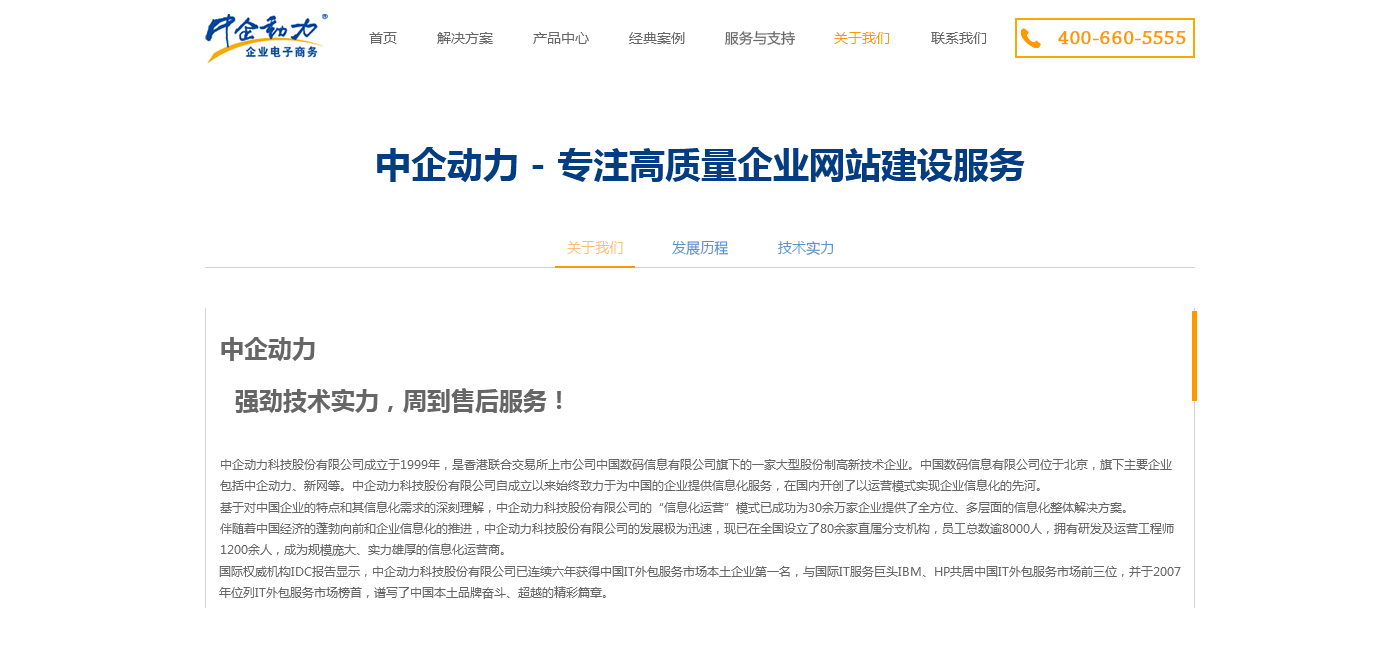
<style>
.page{position:relative;width:1400px;height:670px;background:#ffffff}
.page>*{position:absolute;margin:0}
.t1{font:14px "MicrosoftYaHei";color:#666666}
.t2{font:14px "MicrosoftYaHei";color:#ff9900}
.t3{font:20px "ChaparralPro-Regular";color:#ff9900;font-weight:bold}
.t4{font:36px "MicrosoftYaHei-Bold";color:#003d82}
.t5{font:14.6px "MicrosoftYaHei";color:#ffba73;scale:0.97 1}
.t6{font:14.6px "MicrosoftYaHei";color:#5a94cf;scale:0.97 1}
.t7{font:24px "MicrosoftYaHei-Bold";color:#666666}
.t8{font:12px "MicrosoftYaHei";color:#666666}
</style>
<div class="page">
<p class="t1" style="left:369px;top:32px;width:28px;height:12px">首页</p>
<p class="t1" style="left:437px;top:32px;width:56px;height:12px">解决方案</p>
<p class="t1" style="left:533px;top:32px;width:56px;height:12px">产品中心</p>
<p class="t1" style="left:629px;top:32px;width:56px;height:12px">经典案例</p>
<p class="t1" style="left:725px;top:31px;width:70px;height:14px">服务与支持</p>
<p class="t2" style="left:834px;top:32px;width:55px;height:12px">关于我们</p>
<p class="t1" style="left:931px;top:32px;width:55px;height:12px">联系我们</p>
<p class="t3" style="left:1058px;top:31px;width:128px;height:14px">400-660-5555</p>
<p class="t4" style="left:377px;top:147px;width:648px;height:36px">中企动力 - 专注高质量企业网站建设服务</p>
<p class="t5" style="left:567px;top:241px;width:56px;height:13px">关于我们</p>
<p class="t6" style="left:672px;top:241px;width:57px;height:15px">发展历程</p>
<p class="t6" style="left:778px;top:241px;width:56px;height:15px">技术实力</p>
<p class="t7" style="left:221px;top:337px;width:94px;height:25px">中企动力</p>
<p class="t7" style="left:235px;top:388px;width:327px;height:25px">强劲技术实力，周到售后服务！</p>
<p class="t8" style="left:220px;top:458px;width:952px;height:34px">中企动力科技股份有限公司成立于1999年，是香港联合交易所上市公司中国数码信息有限公司旗下的一家大型股份制高新技术企业。中国数码信息有限公司位于北京，旗下主要企业<br>包括中企动力、新网等。中企动力科技股份有限公司自成立以来始终致力于为中国的企业提供信息化服务，在国内开创了以运营模式实现企业信息化的先河。</p>
<p class="t8" style="left:220px;top:501px;width:954px;height:55px">基于对中国企业的特点和其信息化需求的深刻理解，中企动力科技股份有限公司的“信息化运营”模式已成功为30余万家企业提供了全方位、多层面的信息化整体解决方案。<br>伴随着中国经济的蓬勃向前和企业信息化的推进，中企动力科技股份有限公司的发展极为迅速，现已在全国设立了80余家直属分支机构，员工总数逾8000人，拥有研发及运营工程师<br>1200余人，成为规模庞大、实力雄厚的信息化运营商。</p>
<p class="t8" style="left:219px;top:566px;width:962px;height:33px">国际权威机构IDC报告显示，中企动力科技股份有限公司已连续六年获得中国IT外包服务市场本土企业第一名，与国际IT服务巨头IBM、HP共居中国IT外包服务市场前三位，并于2007<br>年位列IT外包服务市场榜首，谱写了中国本土品牌奋斗、超越的精彩篇章。</p>
</div>
